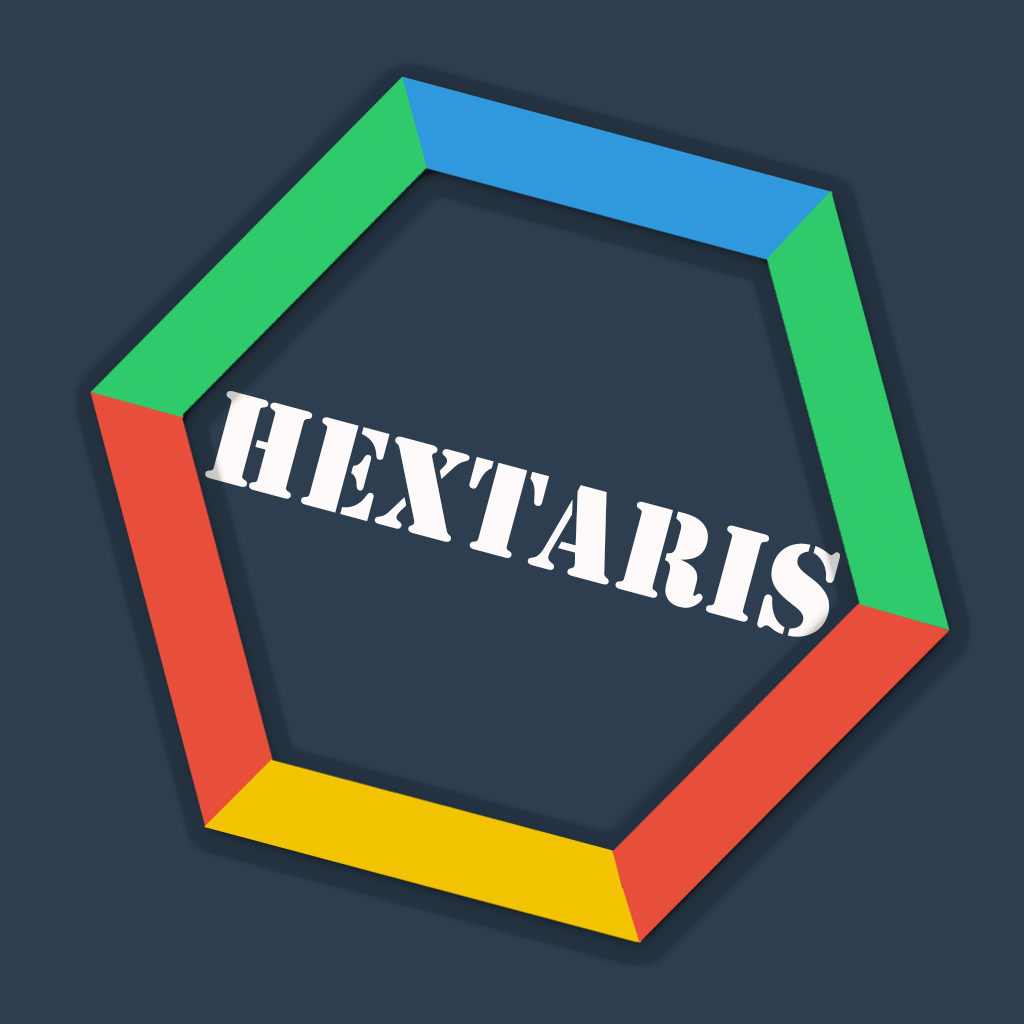
<style>
.page{position:relative;width:1024px;height:1024px;background:#2c3e50}
.page>*{position:absolute;margin:0}
.t1{font:120px "StencilStd";color:#fefafa}
</style>
<div class="page">
<p class="t1" style="left:205px;top:391px;width:635px;height:246px;rotate:15deg">HextAris</p>
</div>
